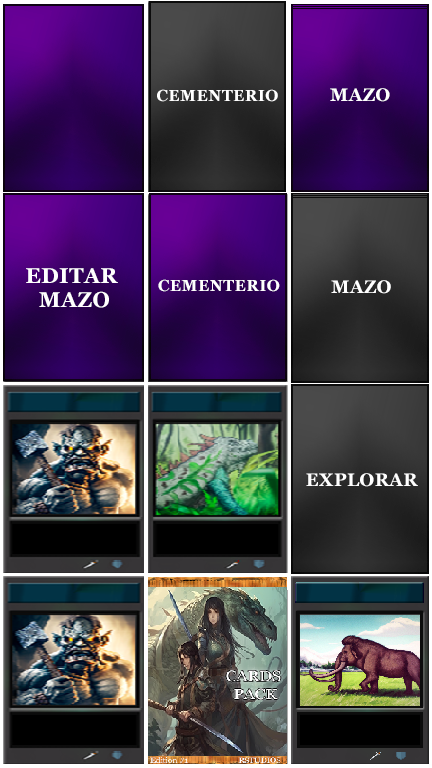
<style>
.page{position:relative;width:432px;height:768px}
.page>*{position:absolute;margin:0}
.t1{font:15.9px "Georgia-Bold";letter-spacing:0.025em;color:#ffffff}
.t2{font:18px "Georgia-Bold";letter-spacing:0.025em;color:#ffffff}
.t3{font:21.2px/23.2px "Georgia-Bold";letter-spacing:0.025em;color:#ffffff}
</style>
<div class="page">
<p class="t1" style="left:157px;top:89px;width:121px;height:13px">CEMENTERIO</p>
<p class="t2" style="left:330px;top:88px;width:60px;height:14px">MAZO</p>
<p class="t3" style="left:26px;top:268px;width:92px;height:40px;text-align:center">EDITAR <br>MAZO</p>
<p class="t1" style="left:158px;top:279px;width:122px;height:13px">CEMENTERIO</p>
<p class="t2" style="left:331px;top:280px;width:60px;height:14px">MAZO</p>
<p class="t2" style="left:306px;top:473px;width:112px;height:14px">EXPLORAR</p>
</div>
